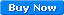
<style>
.page{position:relative;width:64px;height:15px;background:#0183f5}
.page>*{position:absolute;margin:0}
.t1{font:10.4px "Verdana-Bold";color:#ffffff}
</style>
<div class="page">
<p class="t1" style="left:9px;top:4px;width:47px;height:9px">Buy Now</p>
</div>
